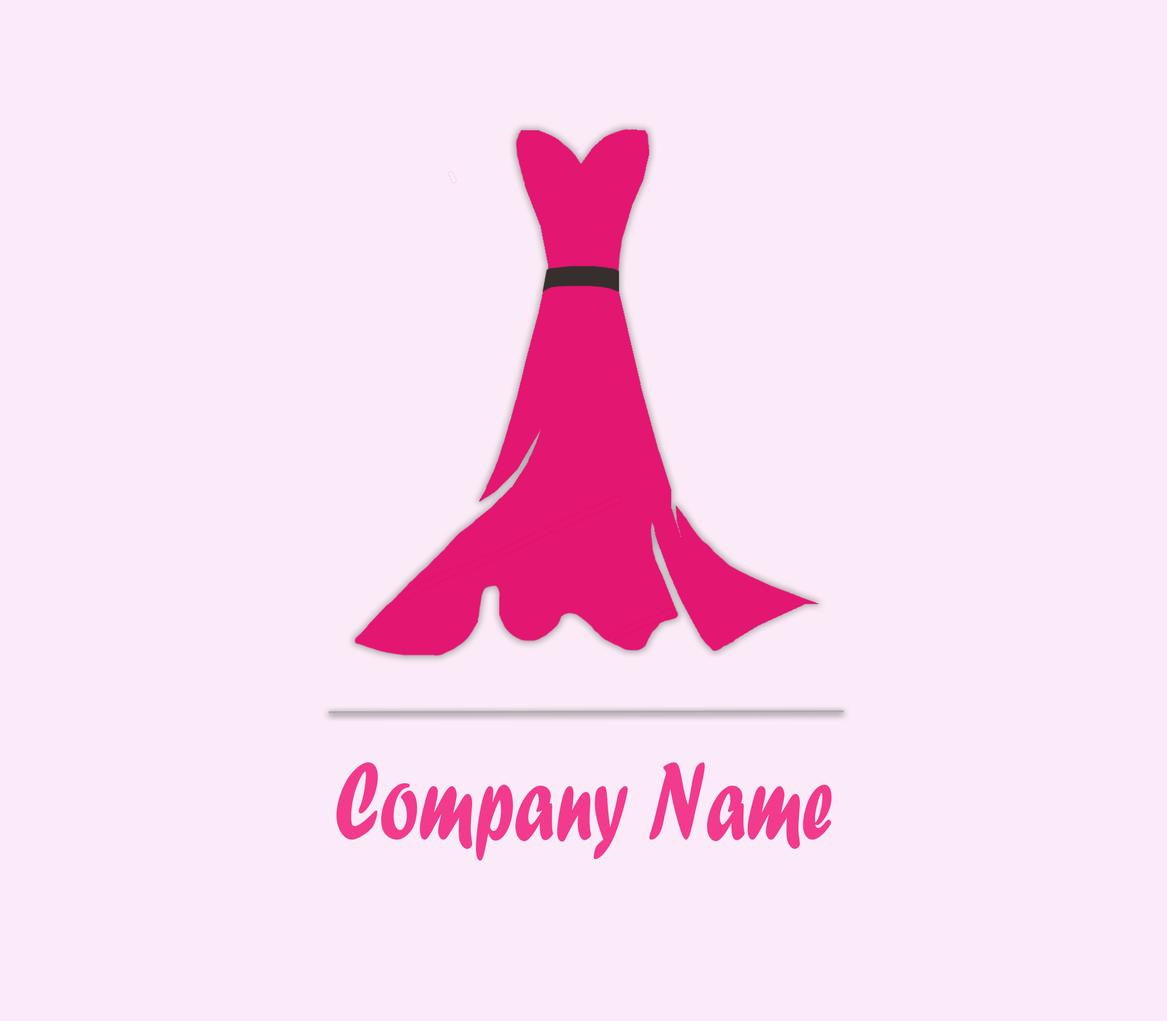
<style>
.page{position:relative;width:1167px;height:1021px;background:#fbebf8}
.page>*{position:absolute;margin:0}
.t1{font:115px "ForteMT";letter-spacing:0.005em;color:#f23b8d;scale:0.62 1}
</style>
<div class="page">
<p class="t1" style="left:336px;top:763px;width:496px;height:98px">Company Name</p>
</div>
